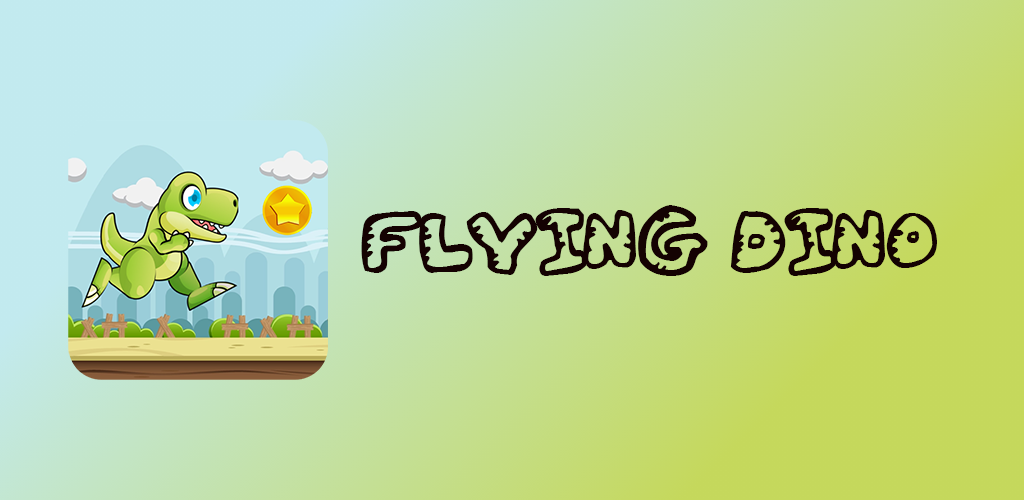
<style>
.page{position:relative;width:1024px;height:500px}
.page>*{position:absolute;margin:0}
.t1{font:100px "Gwibble";color:#140202}
</style>
<div class="page">
<p class="t1" style="left:361px;top:205px;width:576px;height:71px">Flying Dino</p>
</div>
